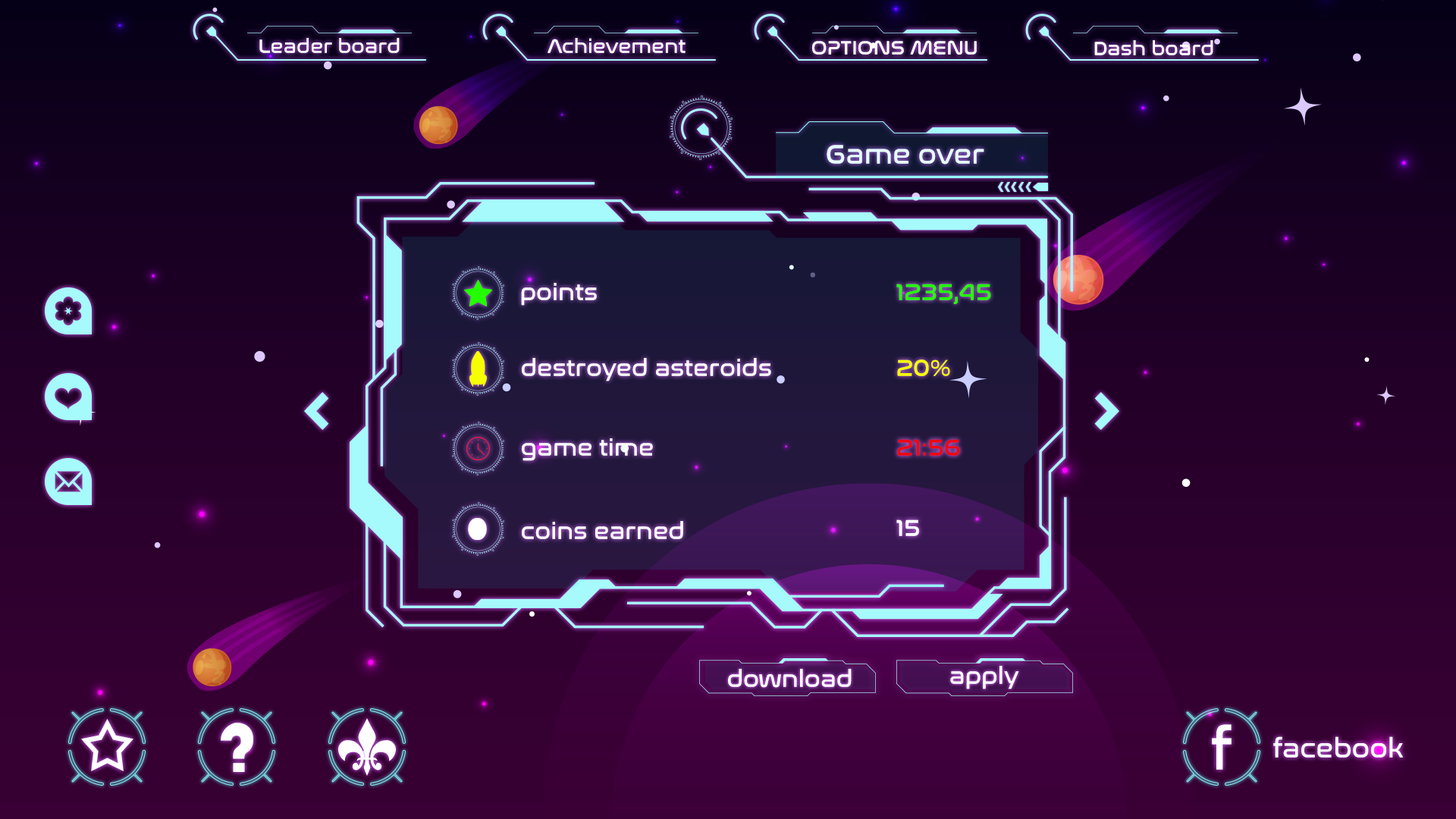
<style>
.page{position:relative;width:1456px;height:819px}
.page>*{position:absolute;margin:0}
.t1{font:19.7px "NasalizationRg-Regular";color:#ffffff}
.t2{font:27.6px "NasalizationRg-Regular";color:#ffffff}
.t3{font:23.7px "NasalizationRg-Regular";color:#ffffff}
.t4{font:23.7px "NasalizationRg-Regular";color:#24ff00}
.t5{font:23.7px "NasalizationRg-Regular";color:#f6ff00}
.t6{font:23.7px "NasalizationRg-Regular";color:#f10612}
.t7{font:59.2px "NasalizationRg-Regular";color:#ffffff}
.t8{font:26.6px "NasalizationRg-Regular";color:#ffffff}
</style>
<div class="page">
<p class="t1" style="left:259px;top:38px;width:141px;height:15px">Leader board</p>
<p class="t1" style="left:548px;top:38px;width:138px;height:16px">Achievement</p>
<p class="t1" style="left:812px;top:40px;width:165px;height:15px">OPTIONS MENU</p>
<p class="t1" style="left:1094px;top:40px;width:119px;height:15px">Dash board</p>
<p class="t2" style="left:827px;top:145px;width:157px;height:20px">Game over</p>
<p class="t3" style="left:521px;top:283px;width:76px;height:23px">points</p>
<p class="t4" style="left:896px;top:284px;width:95px;height:20px">1235,45</p>
<p class="t3" style="left:522px;top:358px;width:249px;height:23px">destroyed asteroids</p>
<p class="t5" style="left:897px;top:359px;width:53px;height:17px">20%</p>
<p class="t3" style="left:522px;top:438px;width:131px;height:23px">game time</p>
<p class="t6" style="left:897px;top:439px;width:63px;height:17px">21:56</p>
<p class="t3" style="left:522px;top:521px;width:161px;height:18px">coins earned</p>
<p class="t3" style="left:896px;top:519px;width:23px;height:17px">15</p>
<p class="t3" style="left:950px;top:666px;width:69px;height:23px">apply</p>
<p class="t3" style="left:728px;top:669px;width:124px;height:19px">download</p>
<p class="t7" style="left:1212px;top:724px;width:20px;height:46px">f</p>
<p class="t8" style="left:1273px;top:736px;width:131px;height:22px">facebook</p>
</div>
